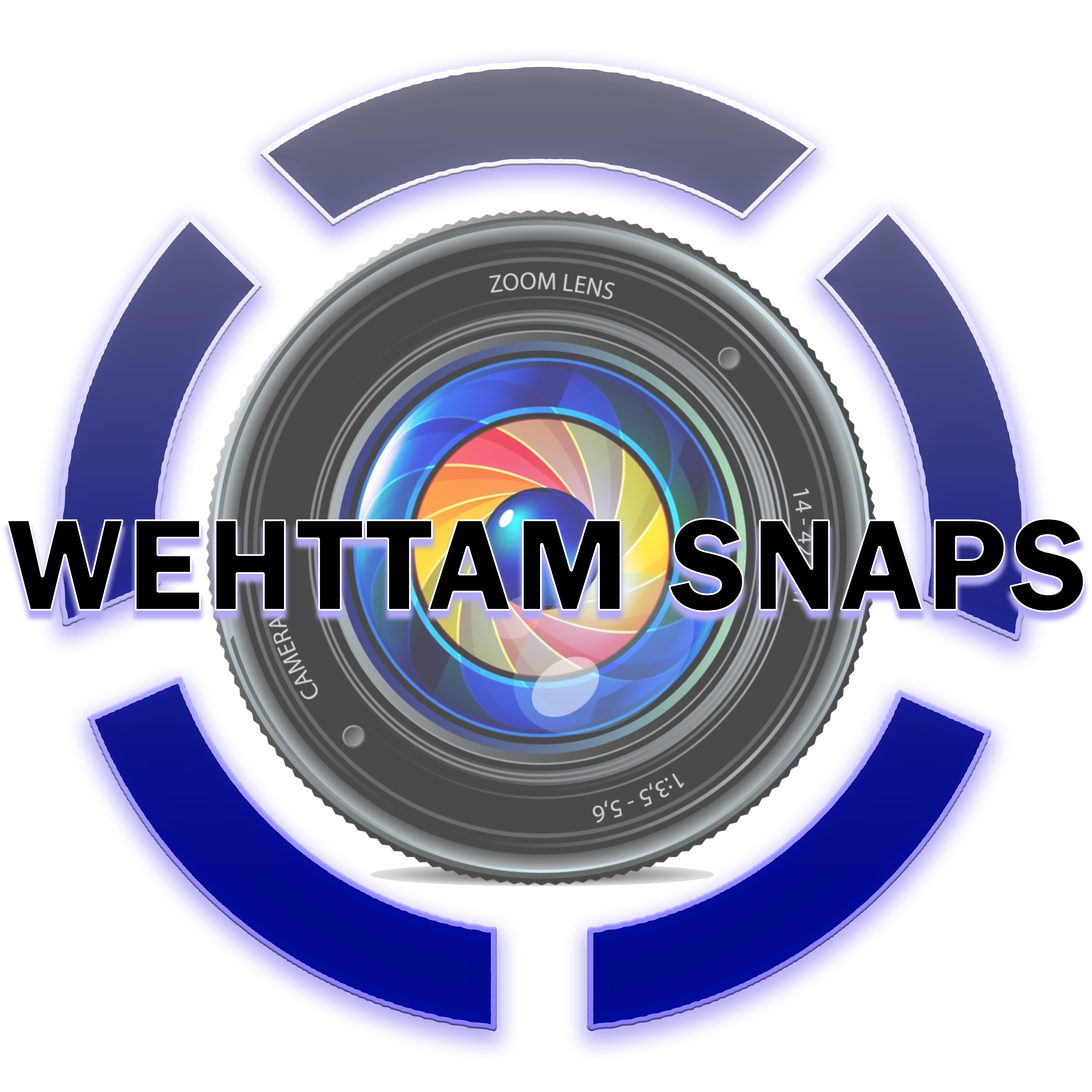
<style>
.page{position:relative;width:1092px;height:1092px;background:#ffffff}
.page>*{position:absolute;margin:0}
.t1{font:133.8px "FranklinGothic-Demi";color:#010101;text-transform:uppercase;font-weight:bold}
</style>
<div class="page">
<p class="t1" style="left:6px;top:518px;width:1079px;height:95px">wehttam snaps</p>
</div>
